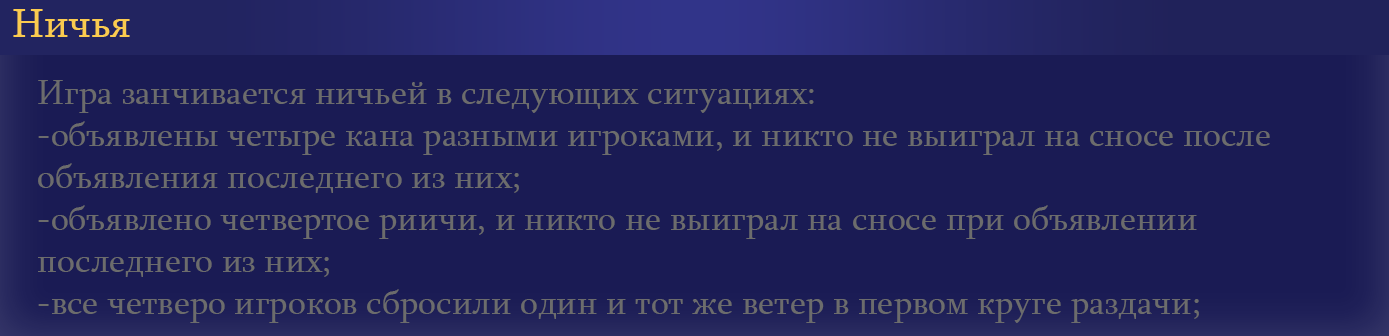
<style>
.page{position:relative;width:1389px;height:336px;background:#1a1b54}
.page>*{position:absolute;margin:0}
.t1{font:42px "Sylfaen";color:#facb4f}
.t2{font:35px "Sylfaen";color:#6c6c6c}
</style>
<div class="page">
<p class="t1" style="left:13px;top:9px;width:117px;height:28px">Ничья</p>
<p class="t2" style="left:38px;top:80px;width:1232px;height:243px">Игра занчивается ничьей в следующих ситуациях:<br>-объявлены четыре кана разными игроками, и никто не выиграл на сносе после объявления последнего из них;<br>-объявлено четвертое риичи, и никто не выиграл на сносе при объявлении последнего из них;<br>-все четверо игроков сбросили один и тот же ветер в первом круге раздачи;</p>
</div>
